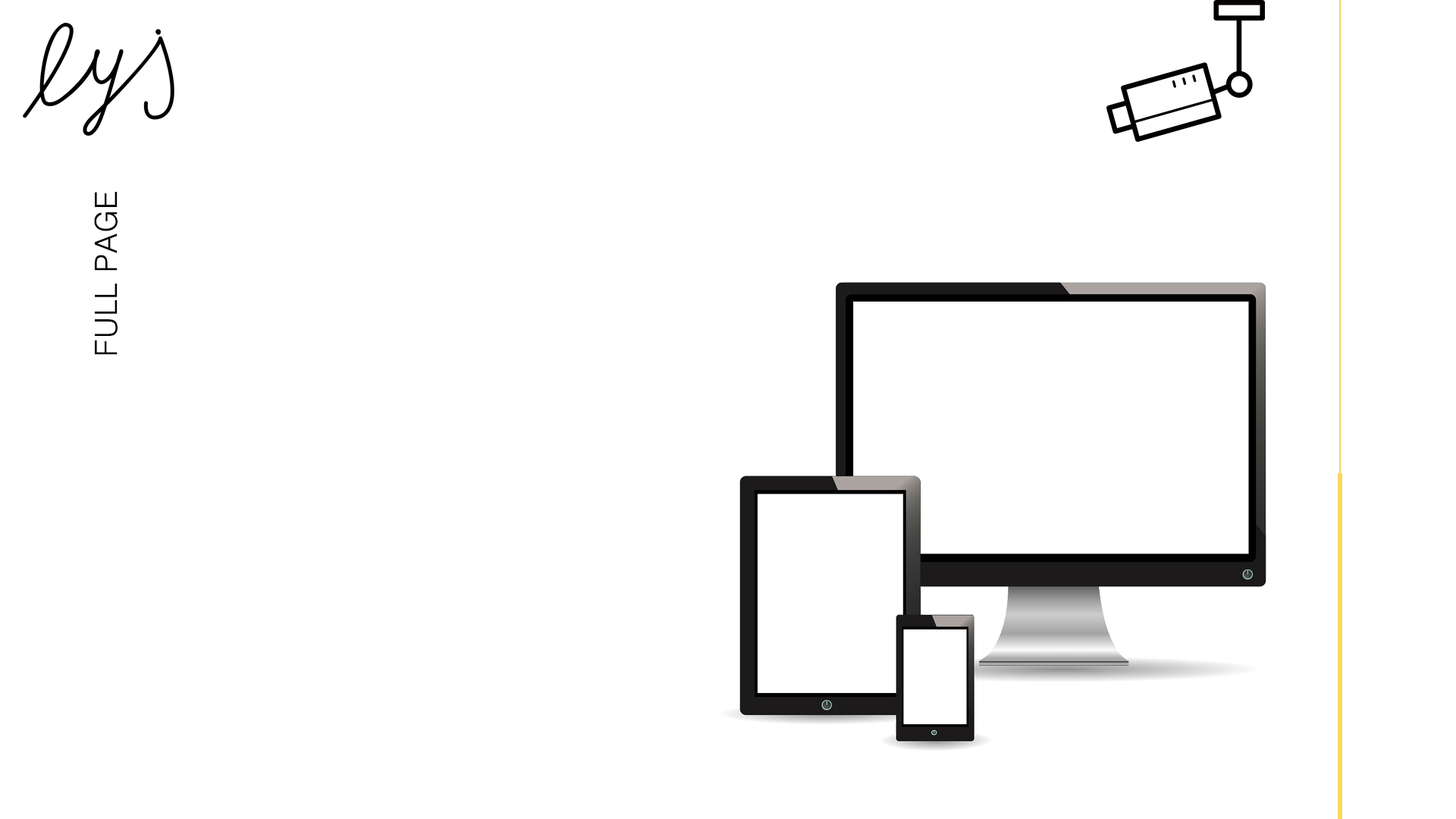
<style>
.page{position:relative;width:1456px;height:819px;background:#ffffff}
.page>*{position:absolute;margin:0}
.t1{font:30.3px "Dotum";color:#000000}
</style>
<div class="page">
<p class="t1" style="left:94px;top:192px;width:24px;height:163px;rotate:-90deg">FULL PAGE</p>
</div>
